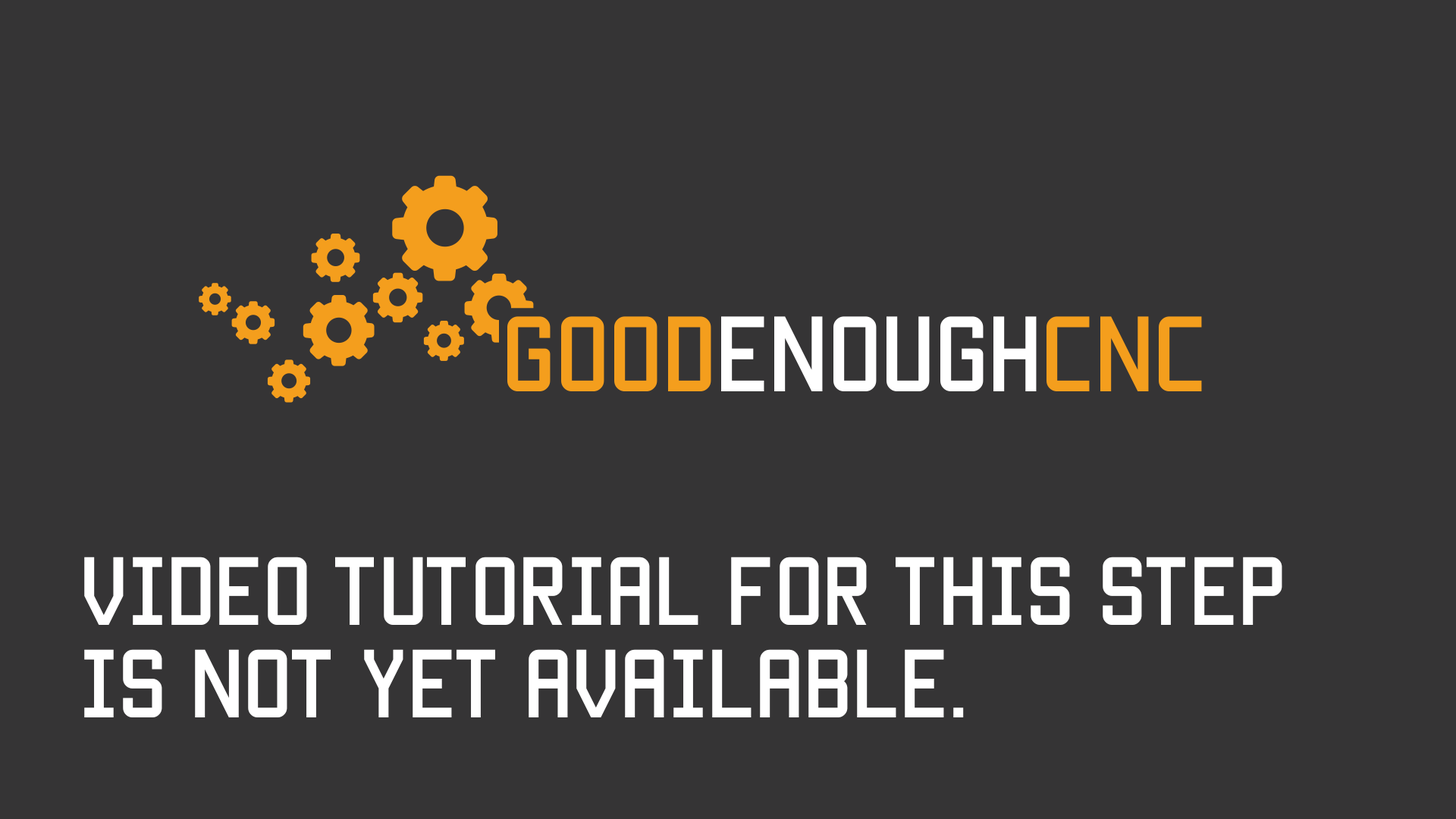
<style>
.page{position:relative;width:1456px;height:819px;background:#353435}
.page>*{position:absolute;margin:0}
.t1{font:77.2px "Manteka";color:#ffffff}
</style>
<div class="page">
<p class="t1" style="left:84px;top:557px;width:1198px;height:160px">VIDEO TUTORIAL FOR THIS STEP<br>IS NOT YET AVAILABLE.</p>
</div>
